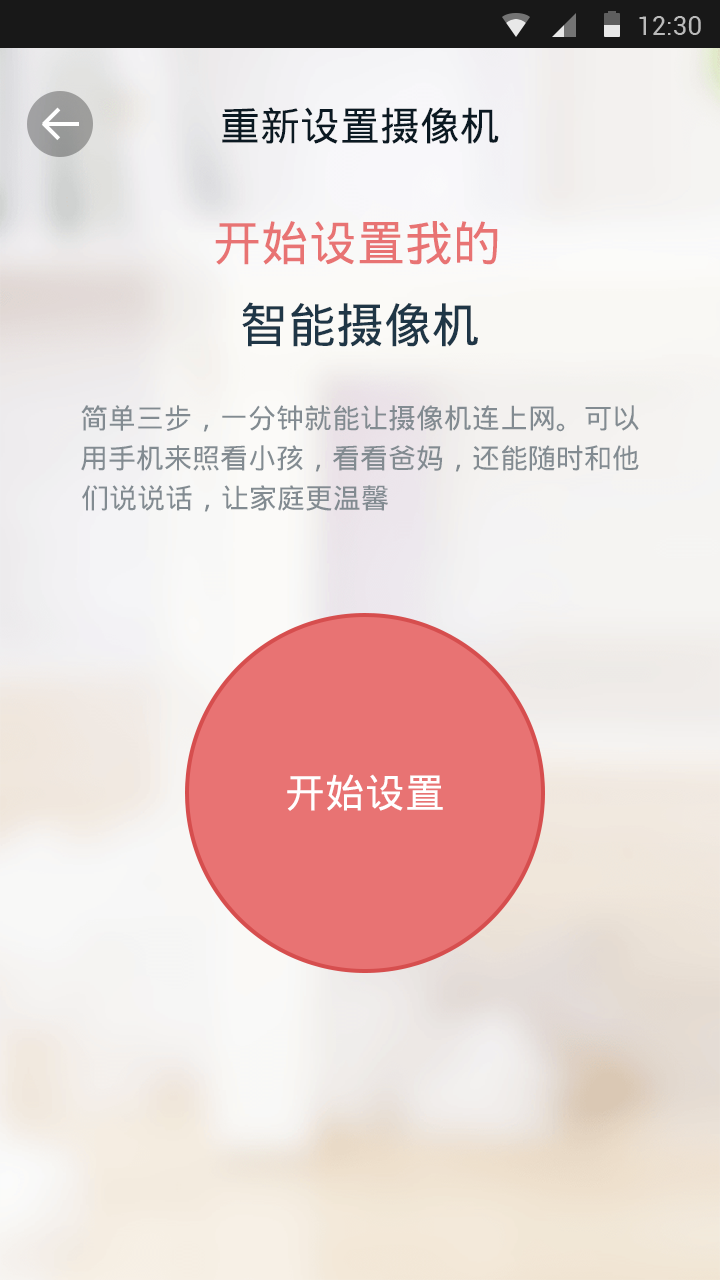
<style>
.page{position:relative;width:720px;height:1280px}
.page>*{position:absolute;margin:0}
.t1{font:40px "DroidSansFallback";color:#0b1922}
.t2{font:48px "DroidSansFallback";color:#e87373}
.t3{font:48px "DroidSansFallback";color:#1f3646}
.t4{font:28px "DroidSansFallback";color:#828b91}
.t5{font:40px "DroidSansFallback";color:#ffffff}
</style>
<div class="page">
<p class="t1" style="left:222px;top:107px;width:277px;height:37px">重新设置摄像机</p>
<p class="t2" style="left:215px;top:221px;width:283px;height:44px">开始设置我的</p>
<p class="t3" style="left:242px;top:302px;width:236px;height:45px">智能摄像机</p>
<p class="t4" style="left:81px;top:405px;width:558px;height:27px">简单三步，一分钟就能让摄像机连上网。可以</p>
<p class="t4" style="left:81px;top:445px;width:558px;height:27px">用手机来照看小孩，看看爸妈，还能随时和他</p>
<p class="t4" style="left:82px;top:485px;width:306px;height:27px">们说说话，让家庭更温馨</p>
<p class="t5" style="left:287px;top:774px;width:156px;height:37px">开始设置</p>
</div>
